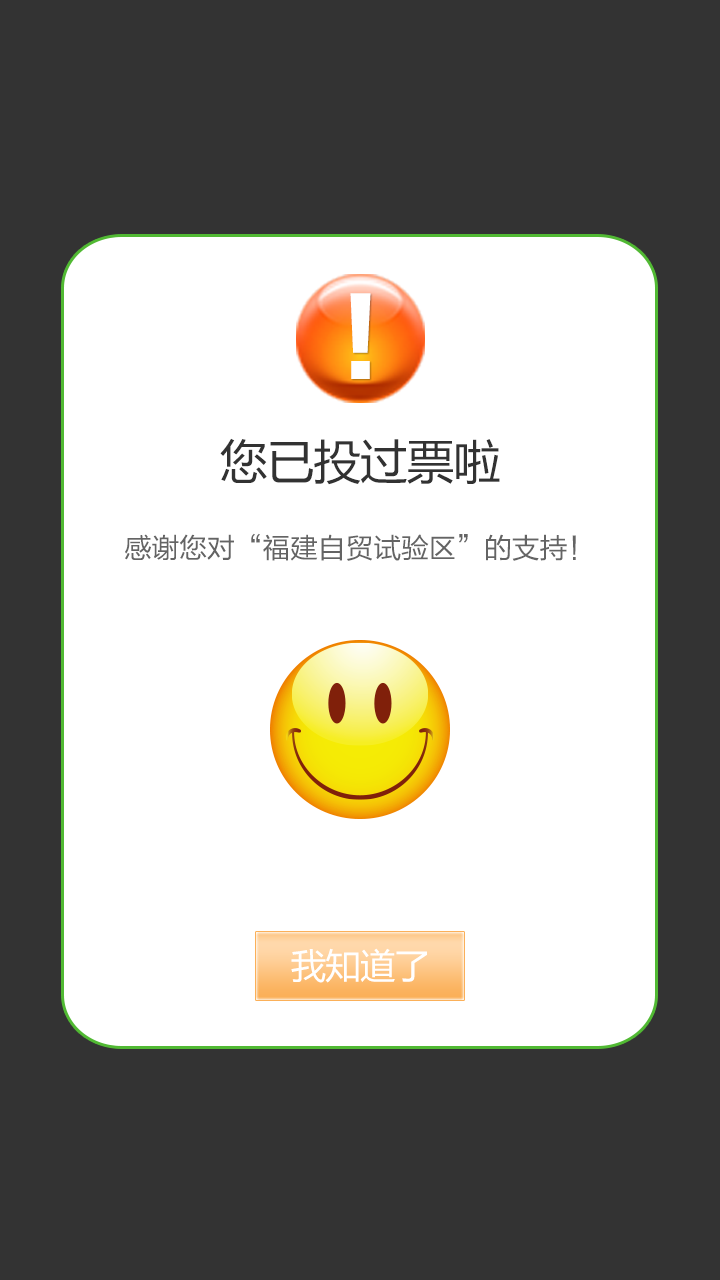
<style>
.page{position:relative;width:720px;height:1280px;background:#333333}
.page>*{position:absolute;margin:0}
.t1{font:99.7px "FZLTTHK--GBK1-0";color:#ffffff;scale:0.95 1}
.t2{font:47.2px "MicrosoftYaHei";letter-spacing:-0.01em;color:#323232}
.t3{font:28px "FZLTHK--GBK1-0";letter-spacing:-0.01em;color:#646464}
.t4{font:35px "MicrosoftYaHei";letter-spacing:-0.01em;color:#ffffff}
</style>
<div class="page">
<p class="t1" style="left:350px;top:293px;width:21px;height:86px">！</p>
<p class="t2" style="left:220px;top:438px;width:280px;height:47px">您已投过票啦</p>
<p class="t3" style="left:125px;top:533px;width:451px;height:28px">感谢您对“福建自贸试验区”的支持！</p>
<p class="t4" style="left:291px;top:948px;width:136px;height:35px">我知道了</p>
</div>
